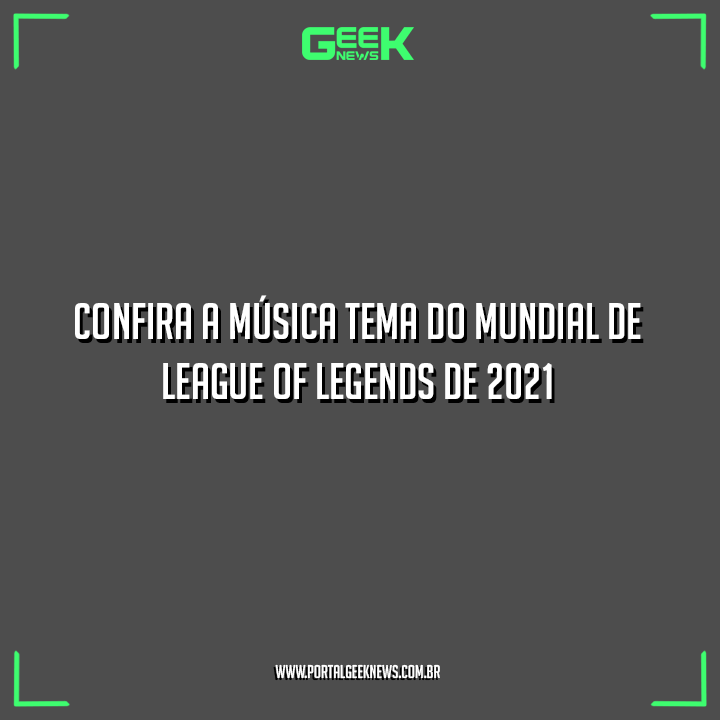
<style>
.page{position:relative;width:720px;height:720px;background:#4d4d4d}
.page>*{position:absolute;margin:0}
.t1{font:50px "BigNoodleTitling";color:#ffffff}
.t2{font:18px "BigNoodleTitling";color:#ffffff}
</style>
<div class="page">
<p class="t1" style="left:75px;top:295px;width:566px;height:104px;text-align:center">Confira a música tema do Mundial de League of Legends de 2021</p>
<p class="t2" style="left:275px;top:664px;width:165px;height:15px">www.portalgeeknews.com.br</p>
</div>
